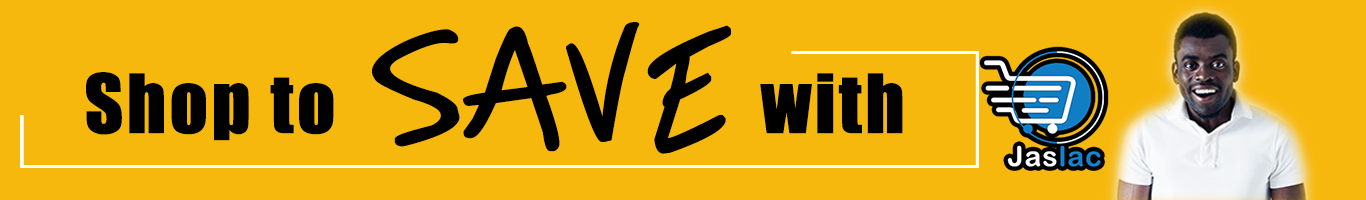
<style>
.page{position:relative;width:1366px;height:200px;background:#f7b80e}
.page>*{position:absolute;margin:0}
.t1{font:75px "Impact";letter-spacing:0.02em;color:#000000;font-weight:bold}
.t2{font:124px "AbjectFailure";letter-spacing:0.02em;color:#000000;font-weight:bold}
</style>
<div class="page">
<p class="t1" style="left:86px;top:22px;width:817px;height:132px">Shop to  <span class="t2">SAVE</span>  with</p>
</div>
